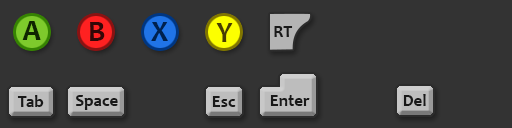
<style>
.page{position:relative;width:512px;height:128px;background:#333333}
.page>*{position:absolute;margin:0}
.t1{font:29px "Candara-Bold";color:#0f2501}
.t2{font:29px "Candara-Bold";color:#320707}
.t3{font:29px "Candara-Bold";color:#00214e}
.t4{font:29px "Candara-Bold";color:#483d03}
.t5{font:17px "Candara-Bold";color:#191919}
</style>
<div class="page">
<p class="t1" style="left:22px;top:21px;width:19px;height:19px">A</p>
<p class="t2" style="left:90px;top:22px;width:15px;height:19px">B</p>
<p class="t3" style="left:151px;top:22px;width:17px;height:19px">X</p>
<p class="t4" style="left:216px;top:23px;width:17px;height:19px">Y</p>
<p class="t5" style="left:274px;top:26px;width:19px;height:11px">RT</p>
<p class="t5" style="left:17px;top:95px;width:27px;height:12px">Tab</p>
<p class="t5" style="left:76px;top:95px;width:42px;height:15px">Space</p>
<p class="t5" style="left:212px;top:96px;width:24px;height:11px">Esc</p>
<p class="t5" style="left:270px;top:95px;width:40px;height:11px">Enter</p>
<p class="t5" style="left:403px;top:94px;width:23px;height:12px">Del</p>
</div>
